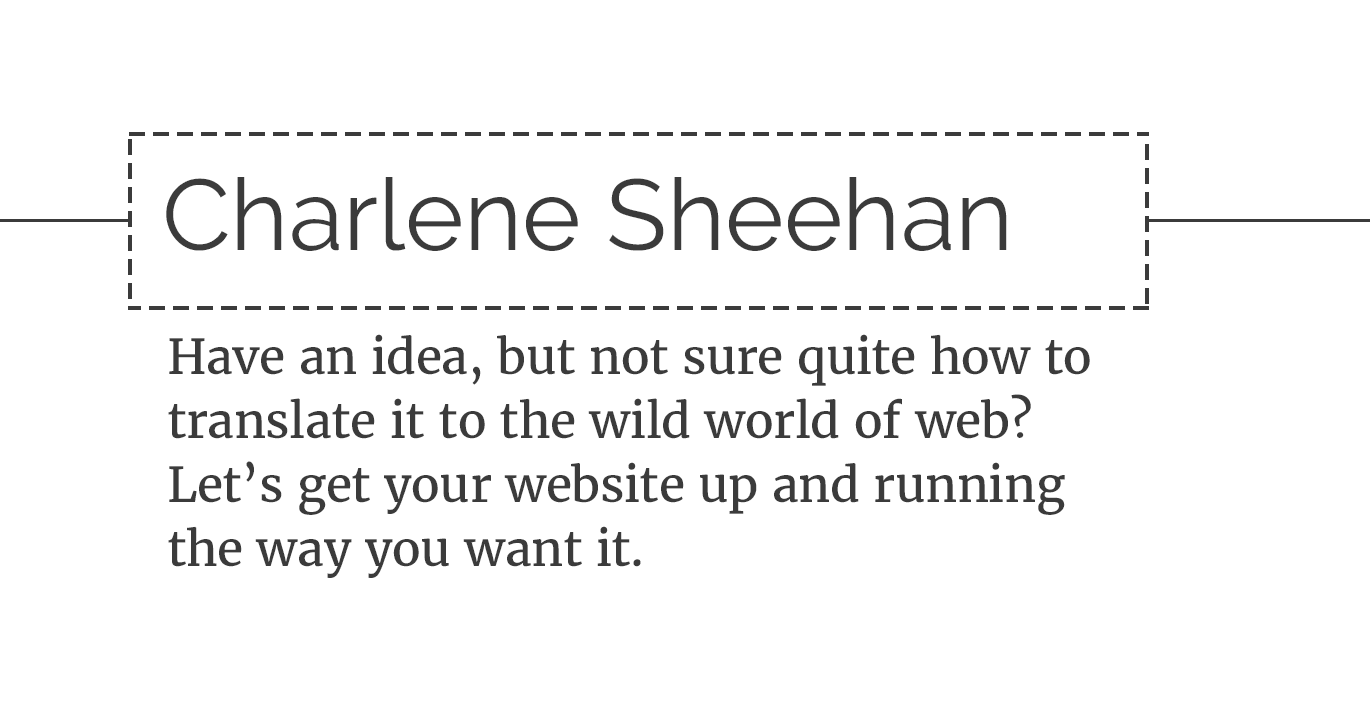
<style>
.page{position:relative;width:1370px;height:712px;background:#ffffff}
.page>*{position:absolute;margin:0}
.t1{font:100px "Raleway-Regular";color:#3b3b3b}
.t2{font:48px/64px "Merriweather-Regular";letter-spacing:-0.01em;color:#3b3b3b}
</style>
<div class="page">
<p class="t1" style="left:166px;top:177px;width:841px;height:74px">Charlene Sheehan</p>
<p class="t2" style="left:168px;top:334px;width:922px;height:244px">Have an idea, but not sure quite how to translate it to the wild world of web? Let’s get your website up and running the way you want it.</p>
</div>
